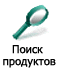
<style>
.page{position:relative;width:58px;height:71px;background:#ffffff}
.page>*{position:absolute;margin:0}
.t1{font:11px/12px "Tahoma";letter-spacing:0.01em;color:#000000}
</style>
<div class="page">
<p class="t1" style="left:3px;top:45px;width:53px;height:23px;text-align:center">Поиск <br>продуктов</p>
</div>
